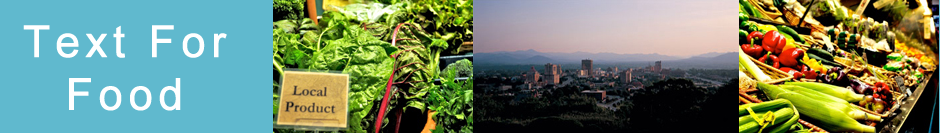
<style>
.page{position:relative;width:940px;height:133px;background:#60b9ce}
.page>*{position:absolute;margin:0}
.t1{font:44px "ArialMT";letter-spacing:0.1em;color:#ffffff;font-weight:bold}
</style>
<div class="page">
<p class="t1" style="left:23px;top:25px;width:204px;height:86px;text-align:center">Text For<br>Food</p>
</div>
